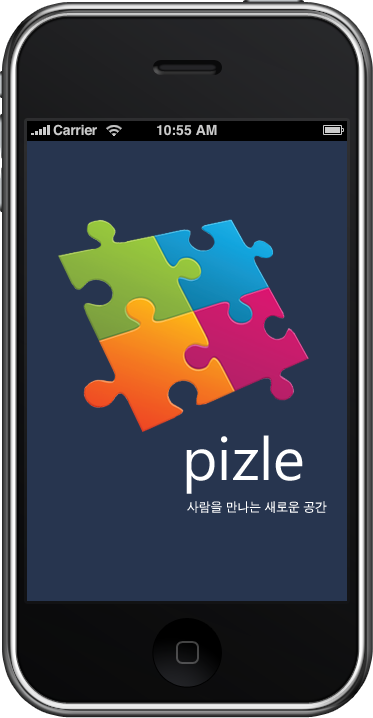
<style>
.page{position:relative;width:373px;height:718px;background:#27354f}
.page>*{position:absolute;margin:0}
.t1{font:60px "SegoeUI";color:#ffffff}
.t2{font:13px "SandTg";color:#ffffff}
</style>
<div class="page">
<p class="t1" style="left:186px;top:435px;width:117px;height:59px">pizle</p>
<p class="t2" style="left:187px;top:501px;width:140px;height:12px">사람을 만나는 새로운 공간</p>
</div>
